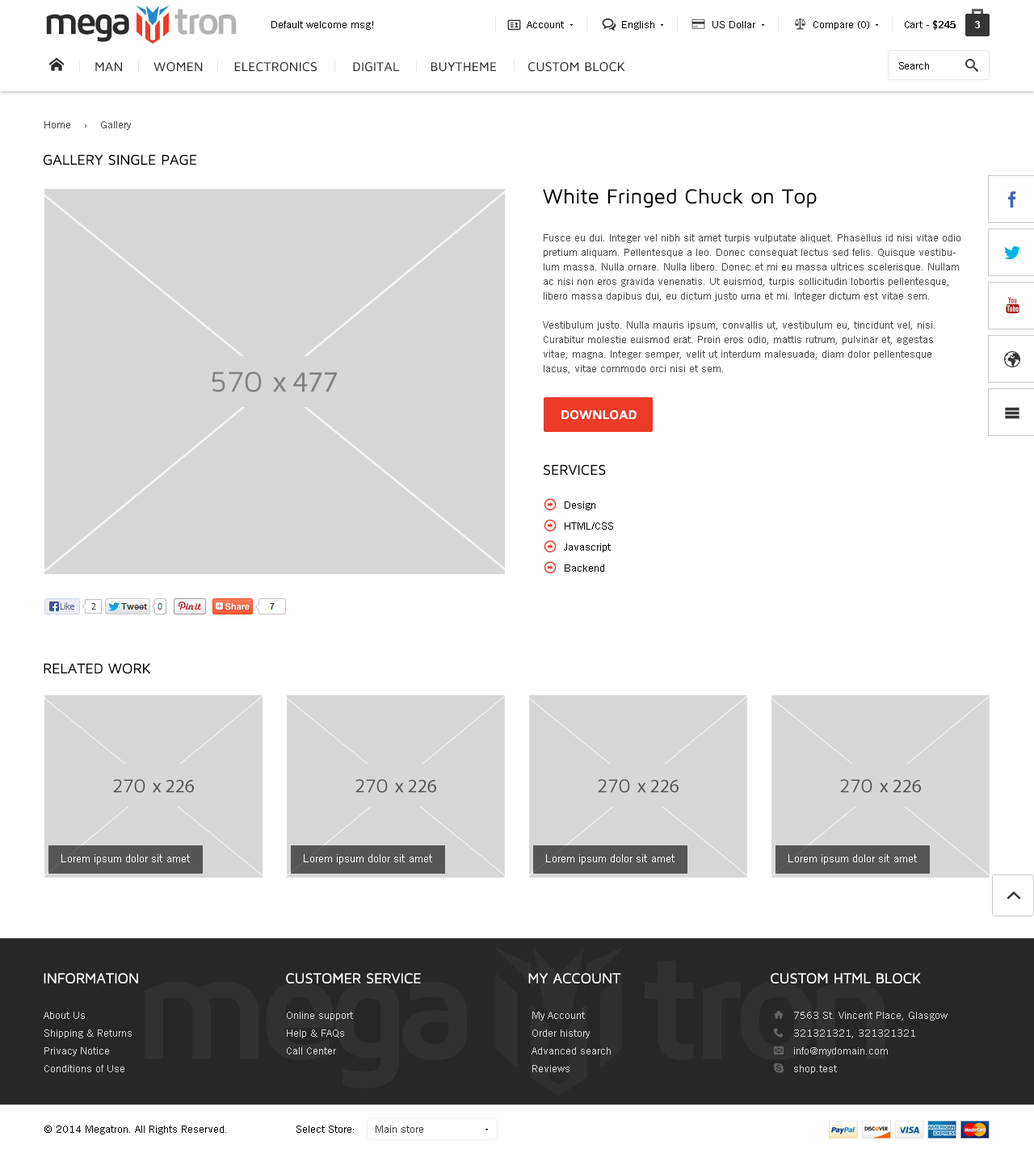
<style>
.page{position:relative;width:1034px;height:1153px;background:#ffffff}
.page>*{position:absolute;margin:0}
.t1{font:38.8px "MavenProBold";letter-spacing:-0.1em;color:#2b2b2b}
.t2{font:38.8px "MavenProBold";letter-spacing:-0.1em;color:#b4b4b4}
.t3{font:10.5px "TradeGothicW01-Roman";color:#000000}
.t4{font:10.5px "TradeGothicW01-Bold2";color:#000000}
.t5{font:9.7px "TradeGothicW01-Bold2";color:#ffffff}
.t6{font:10.5px "TradeGothicW01-Roman";color:#494949}
.t7{font:14.5px "MavenProRegular";color:#000000;text-transform:uppercase}
.t8{font:21px "MavenProRegular";color:#000000}
.t9{font:10.5px/14.5px "TradeGothicW01-Roman";color:#494949}
.t10{font:12.9px "MavenProBold";color:#ffffff;text-transform:uppercase}
.t11{font:10.5px/21px "TradeGothicW01-Roman";color:#000000}
.t12{font:11.3px "TradeGothicW01-Roman";color:#ffffff}
.t13{font:14.5px "MavenProRegular";color:#ffffff;text-transform:uppercase}
.t14{font:10.5px/17.8px "TradeGothicW01-Roman";color:#d9d9d9}
.t15{font:10.5px "TradeGothicW01-Roman";color:#3c3c3c}
</style>
<div class="page">
<p class="t1" style="left:46px;top:9px;width:191px;height:33px">mega     <span class="t2">tron</span></p>
<p class="t3" style="left:271px;top:21px;width:102px;height:9px">Default welcome msg!</p>
<p class="t3" style="left:527px;top:21px;width:37px;height:7px">Account</p>
<p class="t3" style="left:622px;top:21px;width:32px;height:9px">English</p>
<p class="t3" style="left:712px;top:21px;width:43px;height:7px">US Dollar</p>
<p class="t3" style="left:813px;top:21px;width:56px;height:9px">Compare (0)</p>
<p class="t3" style="left:905px;top:20px;width:51px;height:10px">Cart - <span class="t4">$245</span></p>
<p class="t5" style="left:975px;top:21px;width:5px;height:7px">3</p>
<p class="t3" style="left:899px;top:62px;width:30px;height:7px">Search</p>
<p class="t6" style="left:44px;top:121px;width:87px;height:9px">Home    ›    Gallery</p>
<p class="t7" style="left:44px;top:154px;width:152px;height:12px">Gallery Single page</p>
<p class="t8" style="left:543px;top:189px;width:274px;height:19px">White Fringed Chuck on Top</p>
<p class="t9" style="left:543px;top:234px;width:417px;height:140px">Fusce eu dui. Integer vel nibh sit amet turpis vulputate aliquet. Phasellus id nisi vitae odio pretium aliquam. Pellentesque a leo. Donec consequat lectus sed felis. Quisque vestibulum massa. Nulla ornare. Nulla libero. Donec et mi eu massa ultrices scelerisque. Nullam ac nisi non eros gravida venenatis. Ut euismod, turpis sollicitudin lobortis pellentesque, libero massa dapibus dui, eu dictum justo urna et mi. Integer dictum est vitae sem. <br><br>Vestibulum justo. Nulla mauris ipsum, convallis ut, vestibulum eu, tincidunt vel, nisi. Curabitur molestie euismod erat. Proin eros odio, mattis rutrum, pulvinar et, egestas vitae, magna. Integer semper, velit ut interdum malesuada, diam dolor pellentesque lacus, vitae commodo orci nisi et sem.</p>
<p class="t10" style="left:561px;top:410px;width:75px;height:10px">Download</p>
<p class="t7" style="left:544px;top:464px;width:62px;height:12px">Services</p>
<p class="t11" style="left:564px;top:502px;width:49px;height:70px">Design<br>HTML/CSS<br>Javascript<br>Backend</p>
<p class="t7" style="left:44px;top:663px;width:107px;height:11px">RELATED WORK</p>
<p class="t12" style="left:61px;top:855px;width:129px;height:10px">Lorem ipsum dolor sit amet</p>
<p class="t12" style="left:304px;top:855px;width:128px;height:10px">Lorem ipsum dolor sit amet</p>
<p class="t12" style="left:546px;top:855px;width:128px;height:10px">Lorem ipsum dolor sit amet</p>
<p class="t12" style="left:788px;top:855px;width:129px;height:10px">Lorem ipsum dolor sit amet</p>
<p class="t13" style="left:44px;top:973px;width:94px;height:11px">Information</p>
<p class="t13" style="left:286px;top:973px;width:135px;height:11px">customer service</p>
<p class="t13" style="left:528px;top:973px;width:93px;height:11px">My account</p>
<p class="t13" style="left:771px;top:973px;width:150px;height:11px">CUSTOM HTML BLOCK</p>
<p class="t14" style="left:44px;top:1012px;width:88px;height:61px">About Us<br>Shipping &amp; Returns<br>Privacy Notice<br>Conditions of Use</p>
<p class="t14" style="left:287px;top:1012px;width:66px;height:43px">Online support<br>Help &amp; FAQs<br>Call Center</p>
<p class="t14" style="left:531px;top:1012px;width:80px;height:61px">My Account<br>Order history<br>Advanced search<br>Reviews</p>
<p class="t14" style="left:794px;top:1012px;width:153px;height:62px">7563 St. Vincent Place, Glasgow<br>321321321, 321321321<br>info@mydomain.com<br>shop.test</p>
<p class="t3" style="left:44px;top:1126px;width:182px;height:9px">© 2014 Megatron. All Rights Reserved.</p>
<p class="t3" style="left:296px;top:1126px;width:58px;height:7px">Select Store:</p>
<p class="t15" style="left:376px;top:1126px;width:47px;height:7px">Main store</p>
</div>
